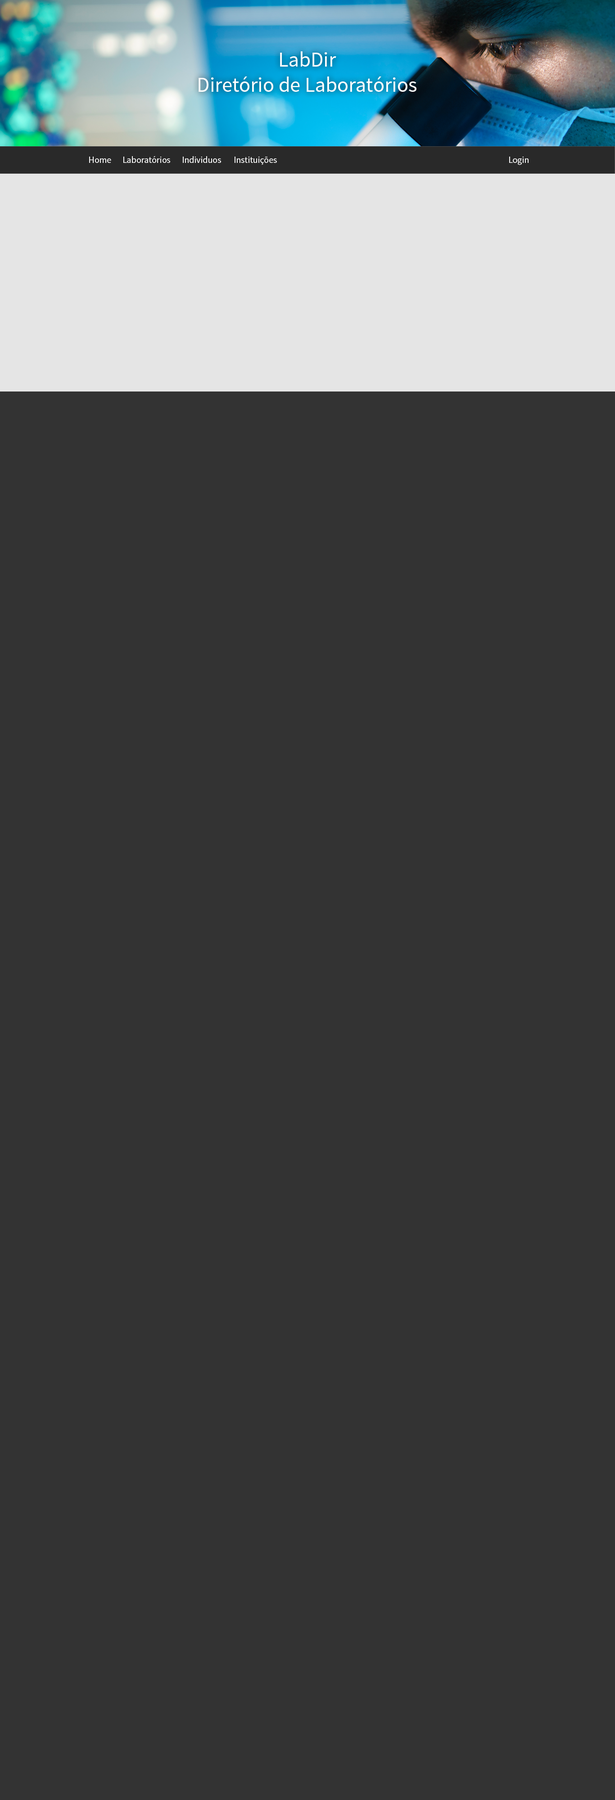
<style>
.page{position:relative;width:615px;height:1800px;background:#333333}
.page>*{position:absolute;margin:0}
.t1{font:21px "SourceSansPro-Regular";color:#ffffff}
.t2{font:9px "SourceSansPro-Regular";color:#ffffff}
</style>
<div class="page">
<p class="t1" style="left:198px;top:51px;width:218px;height:41px;text-align:center">LabDir<br>Diretório de Laboratórios</p>
<p class="t2" style="left:89px;top:157px;width:22px;height:6px">Home</p>
<p class="t2" style="left:123px;top:156px;width:47px;height:7px">Laboratórios</p>
<p class="t2" style="left:183px;top:156px;width:38px;height:7px">Individuos</p>
<p class="t2" style="left:234px;top:157px;width:43px;height:8px">Instituições</p>
<p class="t2" style="left:509px;top:157px;width:19px;height:8px">Login</p>
</div>
